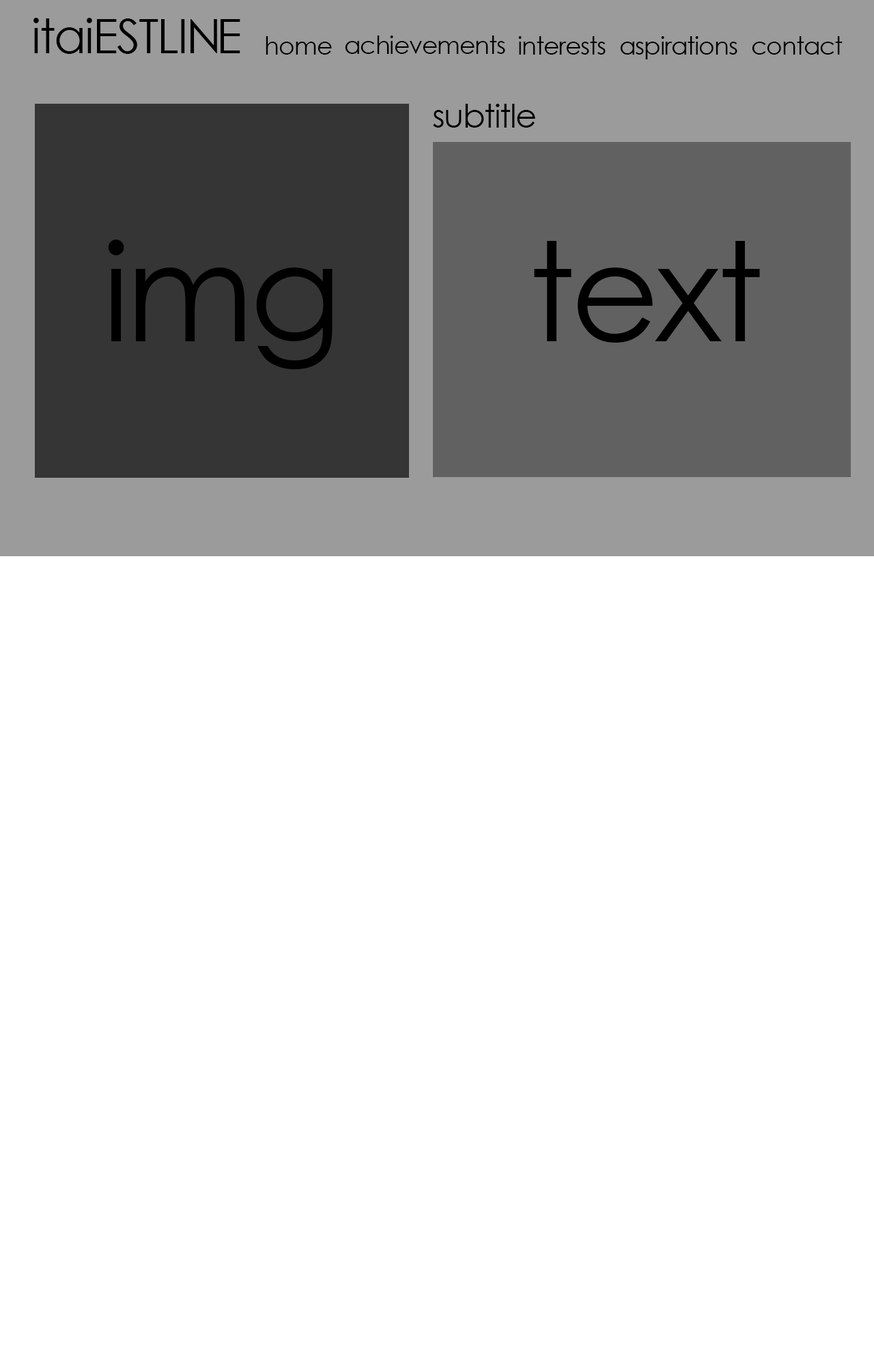
<style>
.page{position:relative;width:874px;height:1365px;background:#ffffff}
.page>*{position:absolute;margin:0}
.t1{font:47.1px "CenturyGothic";letter-spacing:-0.03em;color:#000000}
.t2{font:24.6px "CenturyGothic";letter-spacing:-0.03em;color:#000000}
.t3{font:32.8px "CenturyGothic";letter-spacing:-0.03em;color:#000000}
.t4{font:136.5px "CenturyGothic";letter-spacing:-0.03em;color:#000000}
</style>
<div class="page">
<p class="t1" style="left:33px;top:18px;width:207px;height:36px">itaiESTLINE</p>
<p class="t2" style="left:265px;top:36px;width:67px;height:19px">home</p>
<p class="t2" style="left:345px;top:35px;width:160px;height:19px">achievements</p>
<p class="t2" style="left:518px;top:36px;width:87px;height:19px">interests</p>
<p class="t2" style="left:620px;top:36px;width:117px;height:23px">aspirations</p>
<p class="t2" style="left:751px;top:36px;width:91px;height:19px">contact</p>
<p class="t3" style="left:433px;top:104px;width:102px;height:24px">subtitle</p>
<p class="t4" style="left:108px;top:240px;width:224px;height:129px">img</p>
<p class="t4" style="left:534px;top:241px;width:226px;height:102px">text</p>
</div>
